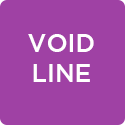
<style>
.page{position:relative;width:125px;height:125px;background:#9f41a4}
.page>*{position:absolute;margin:0}
.t1{font:25px "GothamMedium";color:#ffffff}
</style>
<div class="page">
<p class="t1" style="left:28px;top:34px;width:66px;height:48px;text-align:center">VOID<br>LINE</p>
</div>
